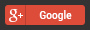
<style>
.page{position:relative;width:90px;height:30px;background:#dd4b39}
.page>*{position:absolute;margin:0}
.t1{font:10px "Roboto-Medium";letter-spacing:0.01em;color:#ffffff}
</style>
<div class="page">
<p class="t1" style="left:39px;top:10px;width:33px;height:11px">Google</p>
</div>
